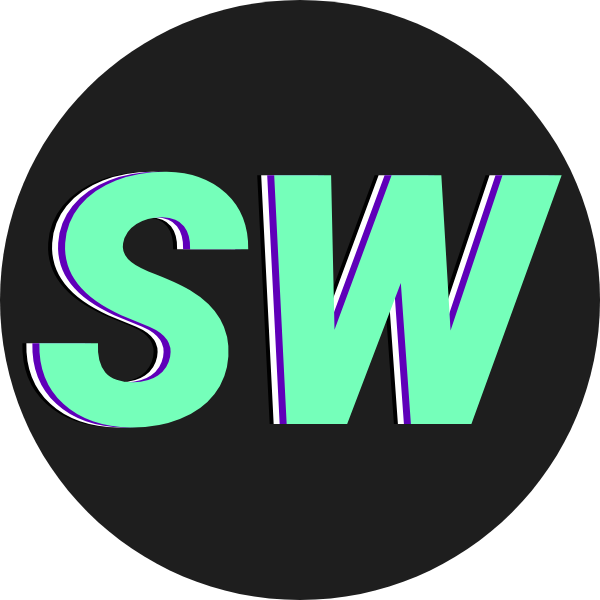
<style>
.page{position:relative;width:600px;height:600px;background:#1e1e1e}
.page>*{position:absolute;margin:0}
.t1{font:350px "Roboto-BlackItalic";color:#75ffba}
</style>
<div class="page">
<p class="t1" style="left:21px;top:171px;width:524px;height:257px">SW</p>
<p class="t1" style="left:25px;top:171px;width:524px;height:257px">SW</p>
<p class="t1" style="left:31px;top:171px;width:524px;height:257px">SW</p>
<p class="t1" style="left:38px;top:171px;width:524px;height:257px">SW</p>
</div>
